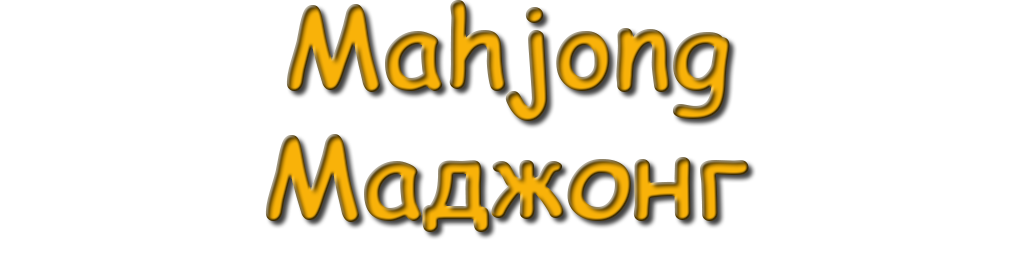
<style>
.page{position:relative;width:1024px;height:256px;background:#ffffff}
.page>*{position:absolute;margin:0}
.t1{font:112px "ComicSansMS-Bold"}
</style>
<div class="page">
<p class="t1" style="left:286px;top:0px;width:444px;height:121px">Mahjong</p>
<p class="t1" style="left:265px;top:134px;width:484px;height:98px">Маджонг</p>
</div>
